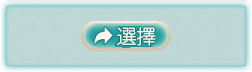
<style>
.page{position:relative;width:252px;height:72px}
.page>*{position:absolute;margin:0}
.t1{font:20px "GothicMB101Pr6N-Light";color:#fcf5ee}
</style>
<div class="page">
<p class="t1" style="left:117px;top:27px;width:39px;height:19px">選擇</p>
</div>
